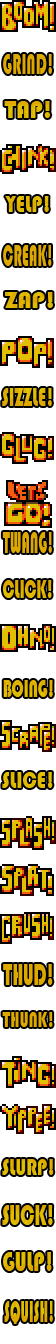
<style>
.page{position:relative;width:56px;height:1344px;background:#ffffff}
.page>*{position:absolute;margin:0}
.t1{font:30.1px "Bauhaus93";color:#dda800;text-transform:uppercase;scale:0.52 1}
.t2{font:25.8px "Bauhaus93";color:#dfb500;scale:0.88 1}
.t3{font:24px "Bauhaus93";color:#dfb400;scale:0.81 1}
.t4{font:31.7px "Bauhaus93";color:#dda800;scale:0.45 1}
.t5{font:24px "Bauhaus93";color:#dfb400}
.t6{font:26.6px "Bauhaus93";color:#dda800;scale:0.65 1}
.t7{font:32.5px "Bauhaus93";color:#dda800;scale:0.44 1}
.t8{font:26.7px "Bauhaus93";color:#deac00;scale:0.58 1}
.t9{font:25px "Bauhaus93";color:#dfb400;scale:0.63 1}
.t10{font:23.6px "Bauhaus93";color:#dfba00;scale:0.81 1}
.t11{font:30.6px "Bauhaus93";color:#dda800;scale:0.57 1}
.t12{font:22.8px "Bauhaus93";color:#dda800;scale:0.67 1}
.t13{font:23.5px "Bauhaus93";color:#dfb700;scale:0.77 1}
.t14{font:29.6px "Bauhaus93";color:#dfb500;scale:0.63 1}
.t15{font:27.6px "Bauhaus93";color:#dfb500;scale:0.73 1}
.t16{font:32.4px "Bauhaus93";color:#dfb400;scale:0.44 1}
</style>
<div class="page">
<p class="t1" style="left:3px;top:54px;width:49px;height:20px">grind!</p>
<p class="t2" style="left:4px;top:101px;width:47px;height:17px">TAP!</p>
<p class="t3" style="left:5px;top:196px;width:44px;height:16px">YELP!</p>
<p class="t4" style="left:3px;top:245px;width:49px;height:21px">CREAK!</p>
<p class="t5" style="left:5px;top:292px;width:48px;height:16px">ZAP!</p>
<p class="t6" style="left:2px;top:388px;width:50px;height:18px">SIZZLE!</p>
<p class="t7" style="left:2px;top:532px;width:50px;height:21px">TWANG!</p>
<p class="t8" style="left:2px;top:580px;width:50px;height:18px">CLICK!</p>
<p class="t9" style="left:3px;top:680px;width:50px;height:17px">BOING!</p>
<p class="t10" style="left:2px;top:772px;width:51px;height:16px">SLICE!</p>
<p class="t11" style="left:3px;top:964px;width:50px;height:21px">THUD!</p>
<p class="t12" style="left:2px;top:1012px;width:51px;height:15px">THUNK!</p>
<p class="t13" style="left:2px;top:1159px;width:52px;height:16px">SLURP!</p>
<p class="t14" style="left:2px;top:1205px;width:51px;height:20px">SUCK!</p>
<p class="t15" style="left:3px;top:1252px;width:49px;height:19px">GULP!</p>
<p class="t16" style="left:4px;top:1301px;width:49px;height:23px">SQUISH!</p>
</div>
